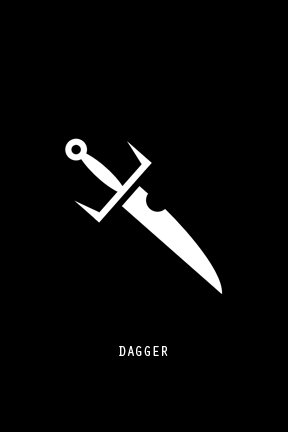
<style>
.page{position:relative;width:288px;height:432px;background:#000000}
.page>*{position:absolute;margin:0}
.t1{font:14px "OratorStd";color:#fbfbfb}
</style>
<div class="page">
<p class="t1" style="left:119px;top:346px;width:49px;height:10px">DAGGER</p>
</div>
